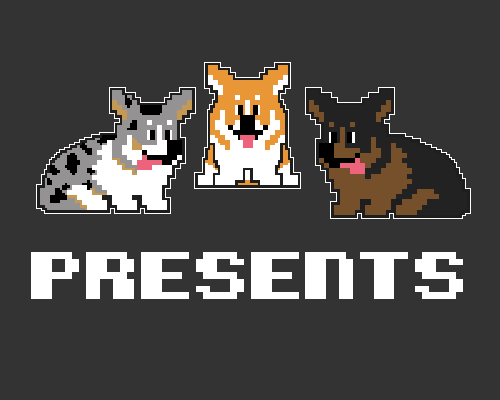
<style>
.page{position:relative;width:500px;height:400px;background:#333333}
.page>*{position:absolute;margin:0}
.t1{font:68.8px "KemcoPixelBold";color:#ffffff}
</style>
<div class="page">
<p class="t1" style="left:31px;top:252px;width:432px;height:47px">presents</p>
</div>
